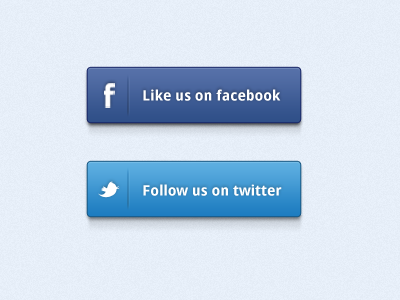
<style>
.page{position:relative;width:400px;height:300px}
.page>*{position:absolute;margin:0}
.t1{font:14.4px "DroidSans-Bold";color:#ffffff}
</style>
<div class="page">
<p class="t1" style="left:143px;top:89px;width:138px;height:12px">Like us on facebook</p>
<p class="t1" style="left:143px;top:184px;width:139px;height:12px">Follow us on twitter</p>
</div>
